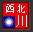
<style>
.page{position:relative;width:33px;height:32px;background:#f20000}
.page>*{position:absolute;margin:0}
.t1{font:10.4px "SimSun";color:#ffffff}
.t2{font:11.7px "SimSun";color:#ffffff}
</style>
<div class="page">
<p class="t1" style="left:6px;top:4px;width:19px;height:9px">西北</p>
<p class="t2" style="left:16px;top:15px;width:11px;height:12px">川</p>
</div>
